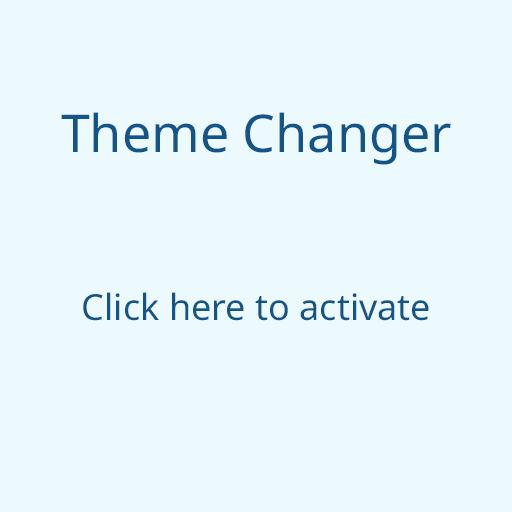
<style>
.page{position:relative;width:512px;height:512px;background:#edfafd}
.page>*{position:absolute;margin:0}
.t1{font:52px "NotoSans-Regular";color:#135589}
.t2{font:36px "NotoSans-Regular";color:#135589}
</style>
<div class="page">
<p class="t1" style="left:61px;top:112px;width:390px;height:53px">Theme Changer</p>
<p class="t2" style="left:83px;top:292px;width:346px;height:29px">Click here to activate</p>
</div>
